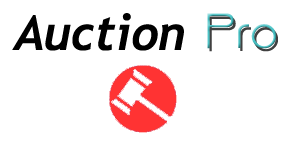
<style>
.page{position:relative;width:300px;height:150px;background:#ffffff}
.page>*{position:absolute;margin:0}
.t1{font:48px "Trebuchet-BoldItalic";color:#000000}
.t2{font:48px "Bisque"}
</style>
<div class="page">
<p class="t1" style="left:12px;top:13px;width:172px;height:38px">Auction</p>
<p class="t2" style="left:207px;top:13px;width:69px;height:36px">Pro</p>
</div>
